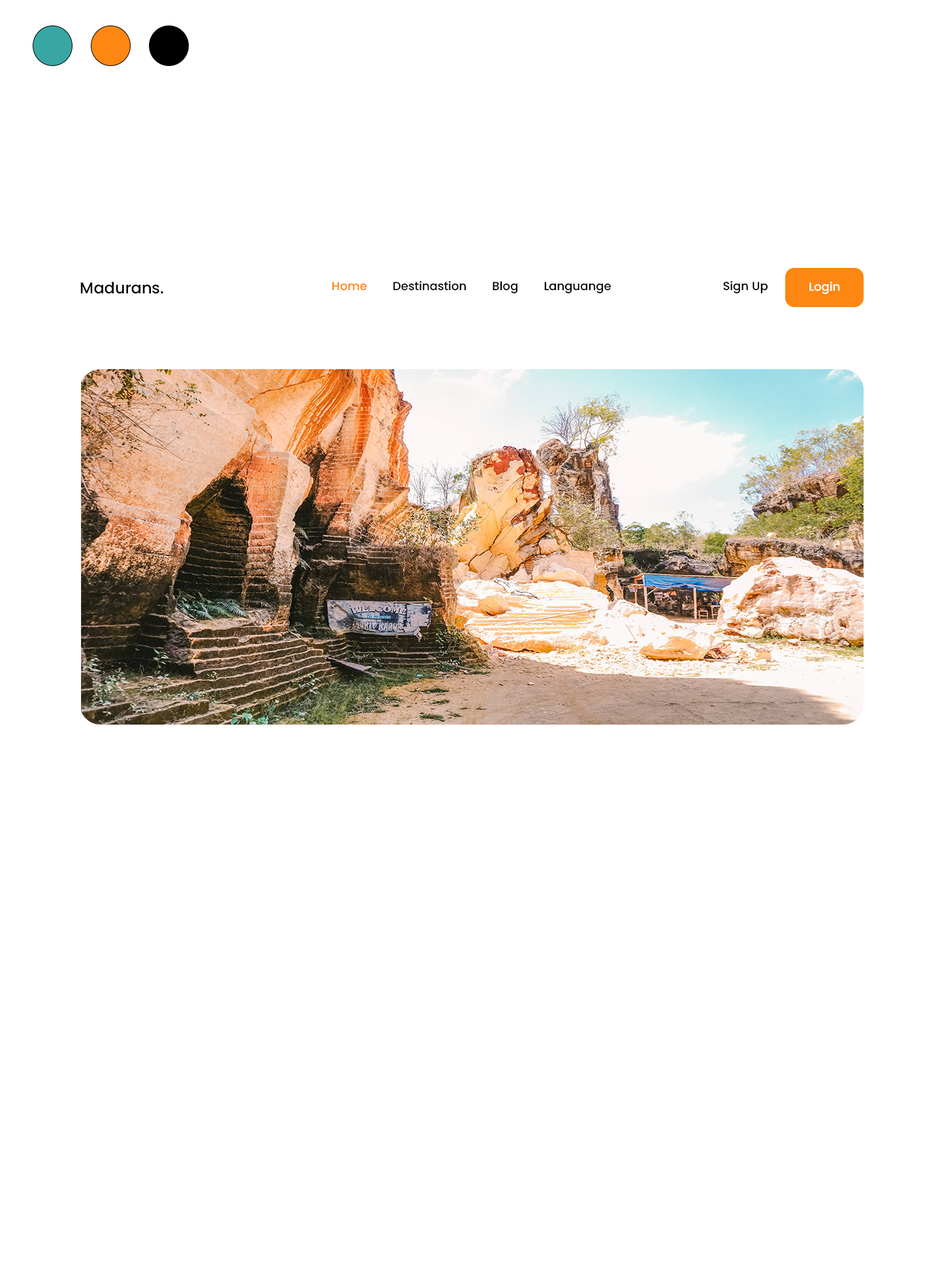
<style>
.page{position:relative;width:942px;height:1265px;background:#ffffff}
.page>*{position:absolute;margin:0}
.t1{font:15.7px "Poppins-Medium";letter-spacing:0.01em;color:#000000}
.t2{font:11.8px "Poppins-Medium";letter-spacing:0.01em;color:#060303}
.t3{font:11.8px "Poppins-Medium";letter-spacing:0.01em;color:#fd8712}
.t4{font:11.8px "Poppins-Medium";letter-spacing:0.01em;color:#000000}
.t5{font:11.8px "Poppins-Medium";letter-spacing:0.01em;color:#ffffff}
</style>
<div class="page">
<p class="t1" style="left:80px;top:282px;width:83px;height:12px">Madurans.</p>
<p class="t2" style="left:332px;top:281px;width:280px;height:12px"><span class="t3">Home        </span>Destinastion        Blog        Languange</p>
<p class="t4" style="left:723px;top:281px;width:46px;height:12px">Sign Up</p>
<p class="t5" style="left:810px;top:282px;width:30px;height:13px">Login</p>
</div>
